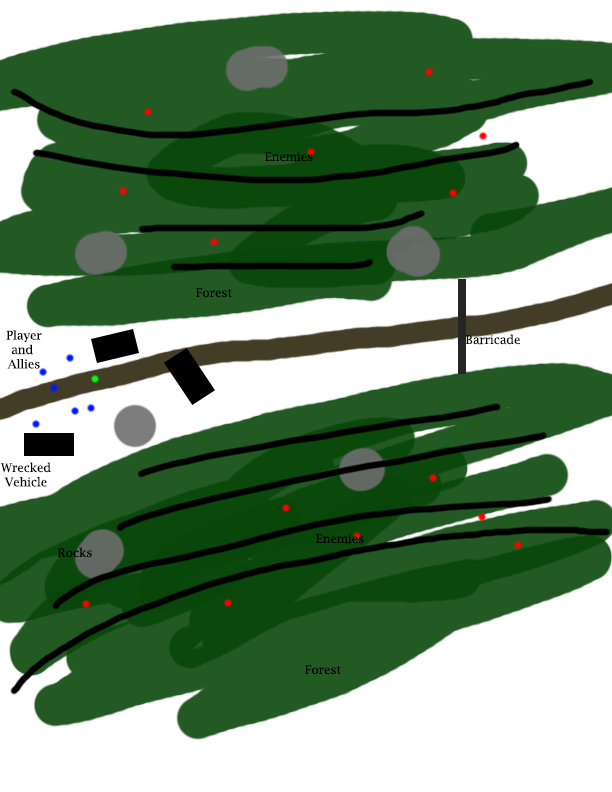
<style>
.page{position:relative;width:612px;height:792px;background:#235a24}
.page>*{position:absolute;margin:0}
.t1{font:12px "LucidaBright";color:#000000}
</style>
<div class="page">
<p class="t1" style="left:265px;top:152px;width:48px;height:10px">Enemies</p>
<p class="t1" style="left:196px;top:288px;width:36px;height:10px">Forest</p>
<p class="t1" style="left:6px;top:330px;width:36px;height:39px;text-align:center">Player<br>and <br>Allies</p>
<p class="t1" style="left:465px;top:334px;width:55px;height:11px">Barricade</p>
<p class="t1" style="left:0px;top:462px;width:51px;height:25px;text-align:center">Wrecked<br>Vehicle</p>
<p class="t1" style="left:316px;top:534px;width:48px;height:10px">Enemies</p>
<p class="t1" style="left:57px;top:547px;width:35px;height:11px">Rocks</p>
<p class="t1" style="left:305px;top:665px;width:36px;height:10px">Forest</p>
</div>
